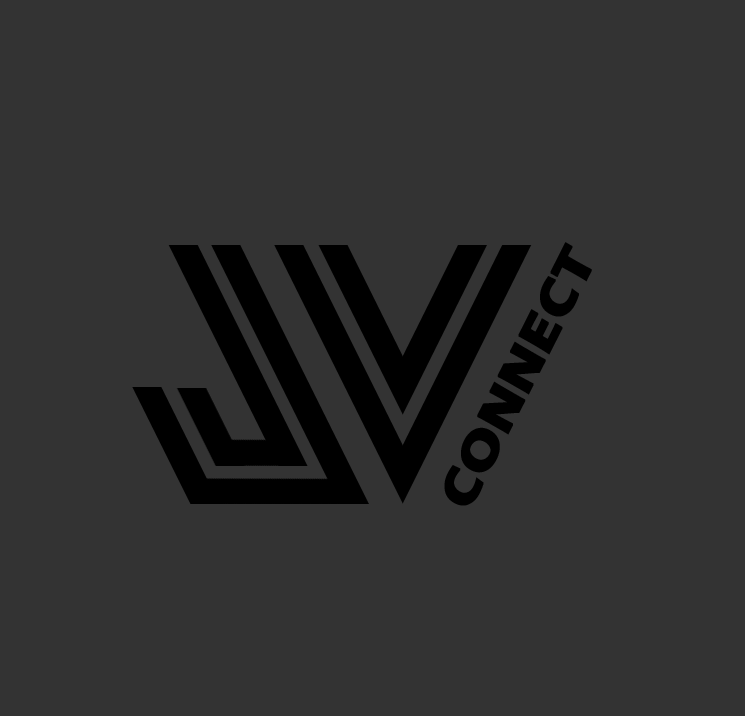
<style>
.page{position:relative;width:745px;height:716px;background:#333333}
.page>*{position:absolute;margin:0}
.t1{font:53.4px "ErasITC-Bold";color:#000000;text-transform:uppercase;font-weight:bold}
</style>
<div class="page">
<p class="t1" style="left:444px;top:242px;width:148px;height:264px;rotate:-63deg">CONNECT</p>
</div>
